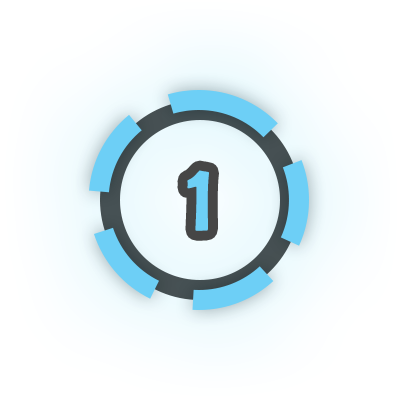
<style>
.page{position:relative;width:400px;height:400px}
.page>*{position:absolute;margin:0}
.t1{font:100px "BerlinSansFB-Reg";color:#6dcff6}
</style>
<div class="page">
<p class="t1" style="left:187px;top:170px;width:22px;height:61px">1</p>
</div>
